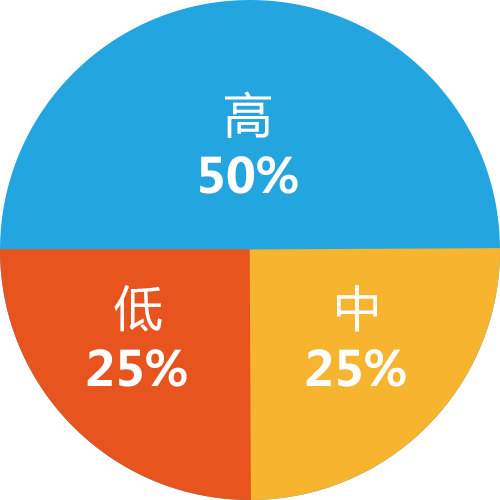
<style>
.page{position:relative;width:500px;height:500px;background:#23a5df}
.page>*{position:absolute;margin:0}
.t1{font:48px "MicrosoftYaHei";color:#ffffff}
.t2{font:48px "MicrosoftYaHei-Bold";color:#ffffff}
</style>
<div class="page">
<p class="t1" style="left:225px;top:91px;width:46px;height:47px">高</p>
<p class="t2" style="left:200px;top:156px;width:98px;height:38px">50%</p>
<p class="t1" style="left:114px;top:285px;width:48px;height:47px">低</p>
<p class="t1" style="left:337px;top:285px;width:40px;height:47px">中</p>
<p class="t2" style="left:87px;top:349px;width:100px;height:38px">25%</p>
<p class="t2" style="left:306px;top:349px;width:100px;height:38px">25%</p>
</div>
